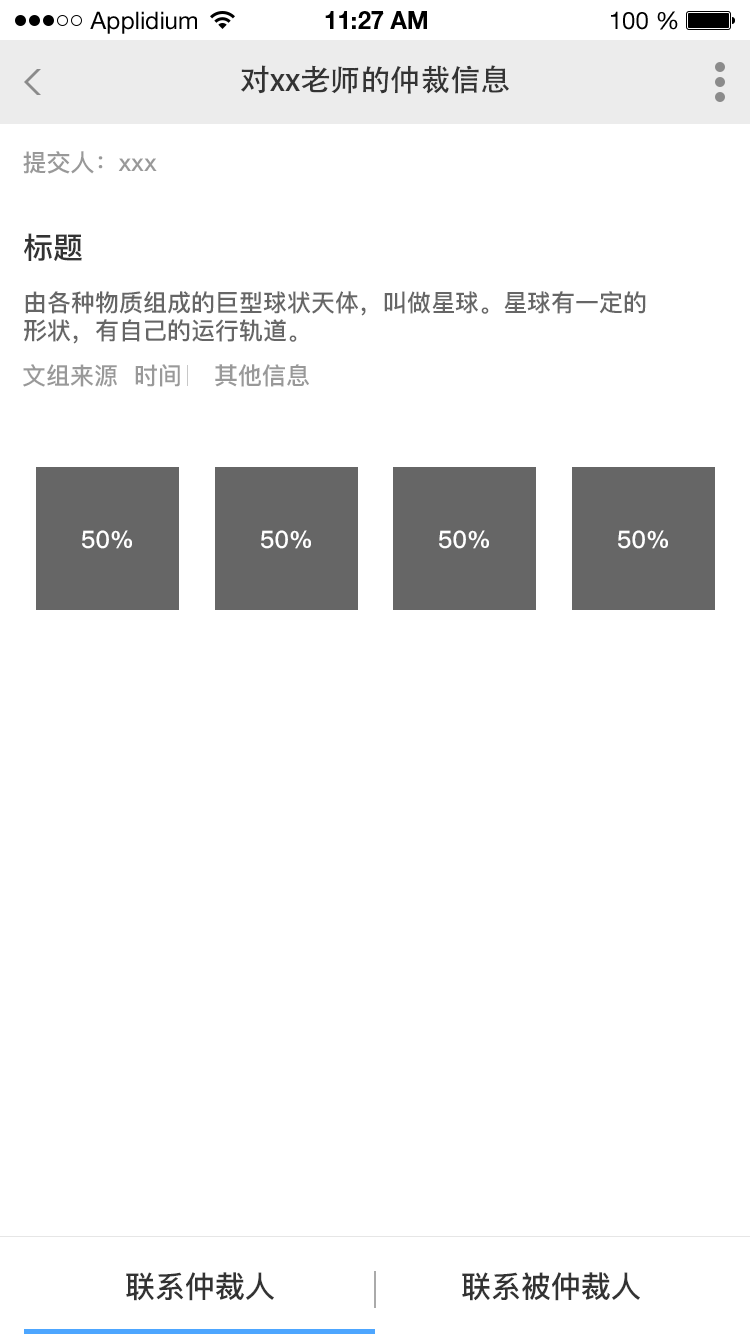
<style>
.page{position:relative;width:750px;height:1334px;background:#ffffff}
.page>*{position:absolute;margin:0}
.t1{font:24px "HelveticaNeueLTStd-Roman";color:#000000}
.t2{font:24px "HelveticaNeueLTStd-Bd";color:#000000}
.t3{font:30px "AdobeHeitiStd-Regular";color:#333333}
.t4{font:24px "PingFang-SC-Bold";color:#999999}
.t5{font:30px "PingFang-SC-Bold";color:#333333}
.t6{font:24px/28.3px "PingFang-SC-Bold";color:#666666}
.t7{font:24px "PingFang-SC-Bold";color:#ffffff}
</style>
<div class="page">
<p class="t1" style="left:90px;top:11px;width:107px;height:23px">Applidium</p>
<p class="t2" style="left:325px;top:11px;width:102px;height:18px">11:27 AM</p>
<p class="t1" style="left:611px;top:11px;width:67px;height:19px">100 %</p>
<p class="t3" style="left:241px;top:65px;width:268px;height:29px">对xx老师的仲裁信息</p>
<p class="t4" style="left:23px;top:151px;width:134px;height:23px">提交人：xxx</p>
<p class="t5" style="left:24px;top:233px;width:58px;height:28px">标题</p>
<p class="t6" style="left:24px;top:291px;width:622px;height:53px">由各种物质组成的巨型球状天体，叫做星球。星球有一定的<br>形状，有自己的运行轨道。</p>
<p class="t4" style="left:23px;top:364px;width:286px;height:23px">文组来源  时间    其他信息</p>
<p class="t7" style="left:82px;top:530px;width:50px;height:19px">50%</p>
<p class="t7" style="left:261px;top:530px;width:50px;height:19px">50%</p>
<p class="t7" style="left:439px;top:530px;width:50px;height:19px">50%</p>
<p class="t7" style="left:618px;top:530px;width:50px;height:19px">50%</p>
<p class="t5" style="left:126px;top:1272px;width:148px;height:29px">联系仲裁人</p>
<p class="t5" style="left:462px;top:1272px;width:178px;height:29px">联系被仲裁人</p>
</div>
